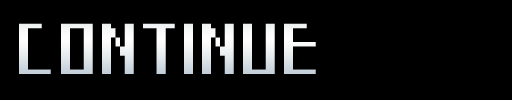
<style>
.page{position:relative;width:512px;height:100px;background:#000000}
.page>*{position:absolute;margin:0}
.t1{font:66.6px "Starcadia";color:#fffefe}
</style>
<div class="page">
<p class="t1" style="left:19px;top:23px;width:297px;height:51px">CONTINUE</p>
</div>
